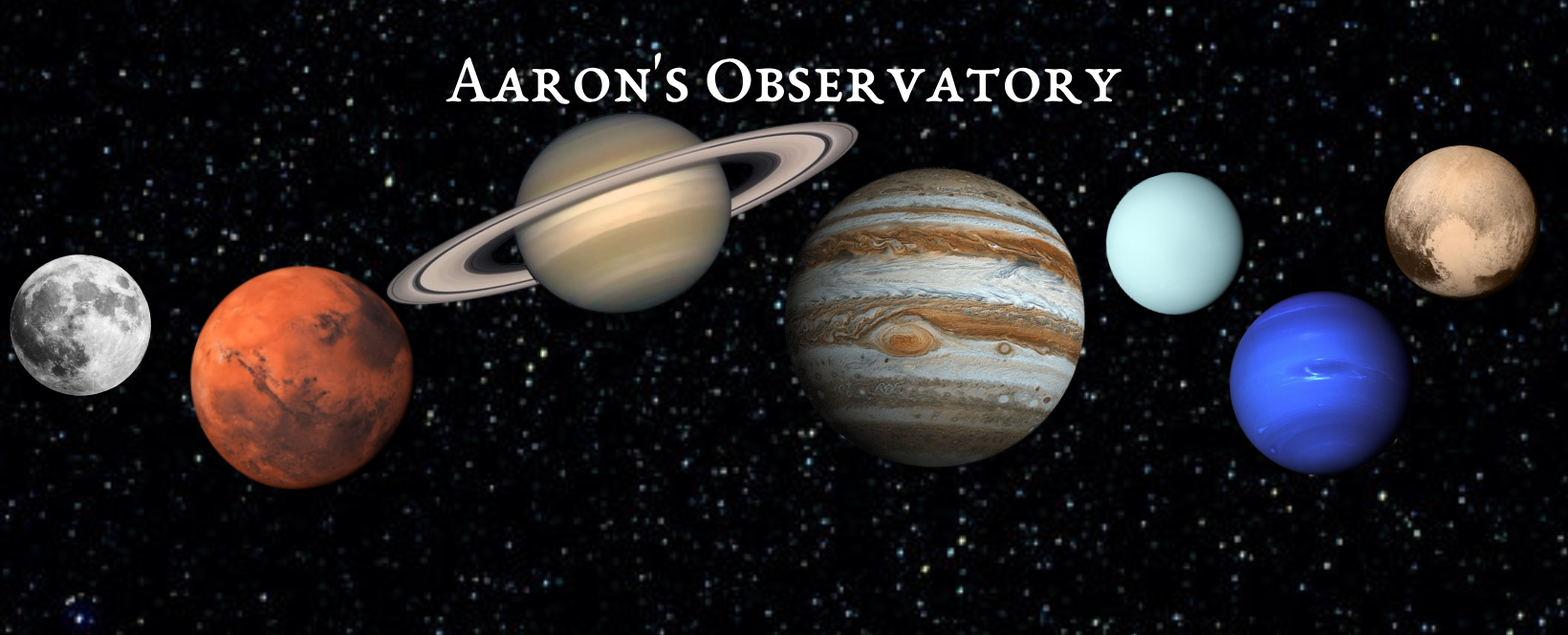
<style>
.page{position:relative;width:1568px;height:635px}
.page>*{position:absolute;margin:0}
.t1{font:71.7px "EBGaramondSC08-Regular";color:#ffffff}
</style>
<div class="page">
<p class="t1" style="left:446px;top:53px;width:676px;height:51px">Aaron's Observatory</p>
</div>
